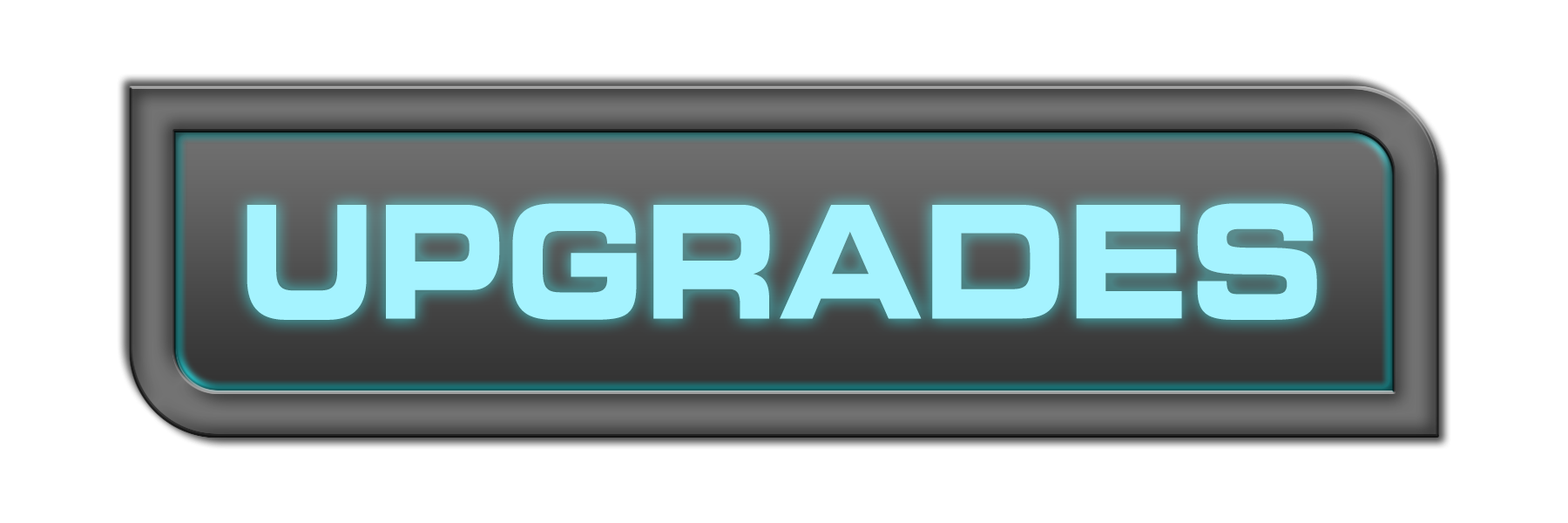
<style>
.page{position:relative;width:1568px;height:523px;background:#ffffff}
.page>*{position:absolute;margin:0}
.t1{font:156.8px "EurostileLTStd-BoldEx2";color:#a5f3ff;scale:0.83 1}
</style>
<div class="page">
<p class="t1" style="left:247px;top:203px;width:1070px;height:117px">UPGRADES</p>
</div>
